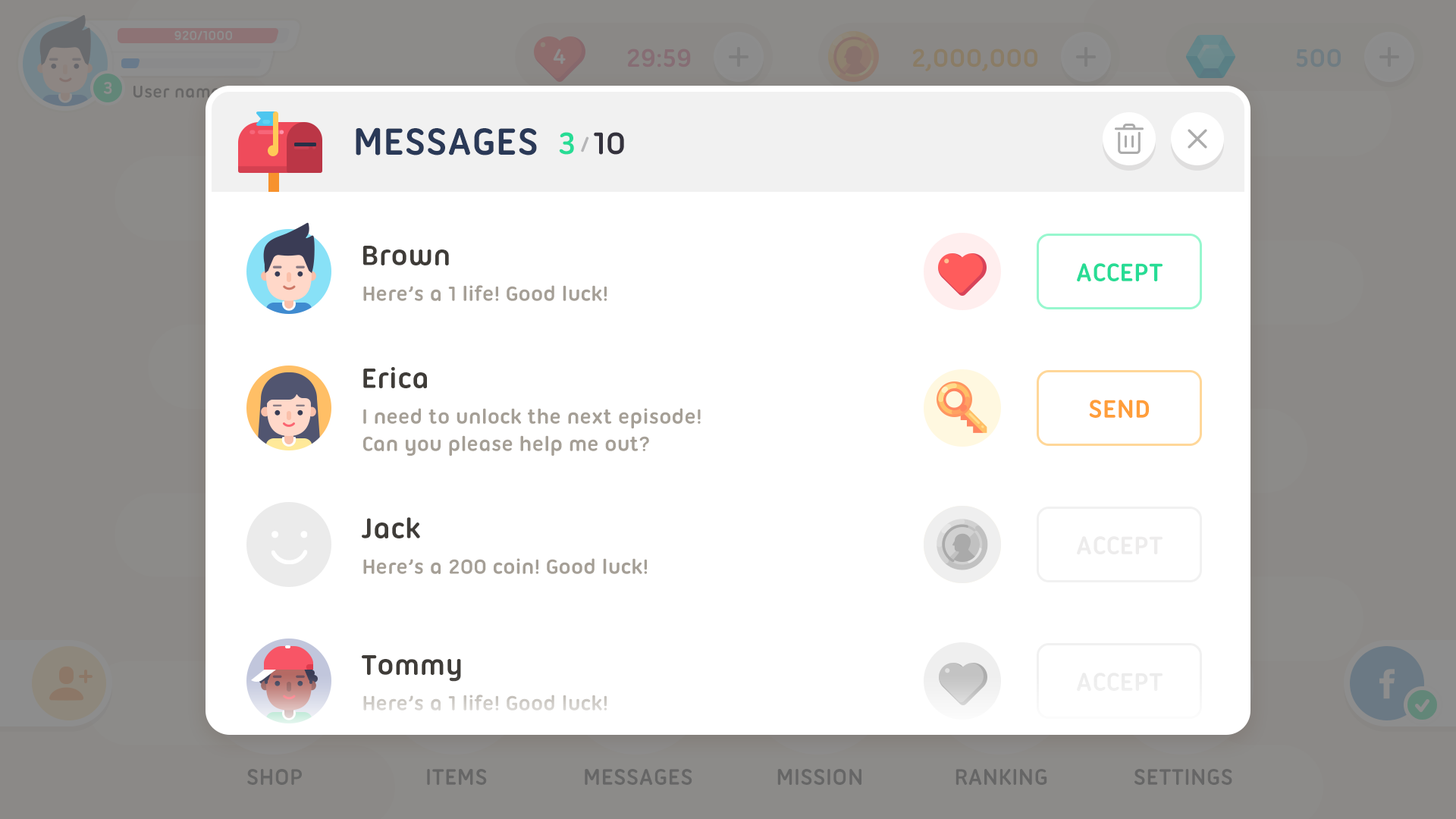
<style>
.page{position:relative;width:1456px;height:819px;background:#ffffff}
.page>*{position:absolute;margin:0}
.t1{font:40.9px "UbuntuTitling-Bold";color:#2a3957;text-transform:uppercase}
.t2{font:33.4px "UbuntuTitling-Bold";color:#34323d;text-transform:uppercase}
.t3{font:33.4px "UbuntuTitling-Bold";color:#27dc95;text-transform:uppercase}
.t4{font:22.7px "UbuntuTitling-Bold";color:#b5b5b7;text-transform:uppercase}
.t5{font:30.3px "UbuntuTitling-Bold";color:#3f3c38}
.t6{font:27.3px "UbuntuTitling-Bold";color:#27dc95;text-transform:uppercase}
.t7{font:22px "UbuntuTitling-Bold";color:#a59f96}
.t8{font:27.3px "UbuntuTitling-Bold";color:#ff9e3a;text-transform:uppercase}
.t9{font:22px/27.3px "UbuntuTitling-Bold";color:#a59f96}
.t10{font:27.3px "UbuntuTitling-Bold";color:#edecec;text-transform:uppercase}
.t11{font:27.3px "UbuntuTitling-Bold";color:#ececec;text-transform:uppercase}
.t12{font:22px "UbuntuTitling-Bold";color:#d1cec9}
</style>
<div class="page">
<p class="t1" style="left:356px;top:127px;width:181px;height:28px">messages</p>
<p class="t2" style="left:559px;top:132px;width:65px;height:23px"><span class="t3">3</span>  10</p>
<p class="t4" style="left:581px;top:136px;width:8px;height:16px">/</p>
<p class="t5" style="left:363px;top:246px;width:86px;height:19px">Brown</p>
<p class="t6" style="left:1077px;top:263px;width:86px;height:19px">accept</p>
<p class="t7" style="left:363px;top:285px;width:244px;height:16px">Here’s a 1 life! Good luck!</p>
<p class="t5" style="left:363px;top:367px;width:64px;height:21px">Erica</p>
<p class="t8" style="left:1089px;top:400px;width:60px;height:18px">send</p>
<p class="t9" style="left:363px;top:408px;width:338px;height:48px">I need to unlock the next episode! <br>Can you please help me out?</p>
<p class="t5" style="left:362px;top:517px;width:58px;height:21px">Jack</p>
<p class="t10" style="left:1077px;top:536px;width:86px;height:19px">accept</p>
<p class="t7" style="left:363px;top:558px;width:284px;height:16px">Here’s a 200 coin! Good luck!</p>
<p class="t5" style="left:362px;top:655px;width:99px;height:27px">Tommy</p>
<p class="t11" style="left:1077px;top:673px;width:86px;height:19px">accept</p>
<p class="t12" style="left:363px;top:695px;width:244px;height:16px">Here’s a 1 life! Good luck!</p>
</div>
